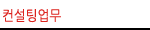
<style>
.page{position:relative;width:150px;height:30px;background:#ffffff}
.page>*{position:absolute;margin:0}
.t1{font:14px "NanumGothic";color:#dc241f;scale:0.9 1}
</style>
<div class="page">
<p class="t1" style="left:3px;top:9px;width:58px;height:14px">컨설팅업무</p>
</div>
